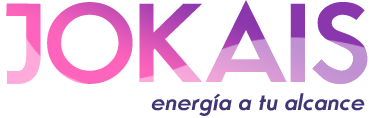
<style>
.page{position:relative;width:370px;height:118px;background:#ffffff}
.page>*{position:absolute;margin:0}
.t1{font:105.8px "MovementBold"}
.t2{font:22.8px "MovementBold";letter-spacing:0.005em;color:#413575;font-style:italic}
</style>
<div class="page">
<p class="t1" style="left:6px;top:0px;width:362px;height:84px">JOKAIS</p>
<p class="t2" style="left:151px;top:93px;width:214px;height:23px">energía a tu alcance</p>
</div>
